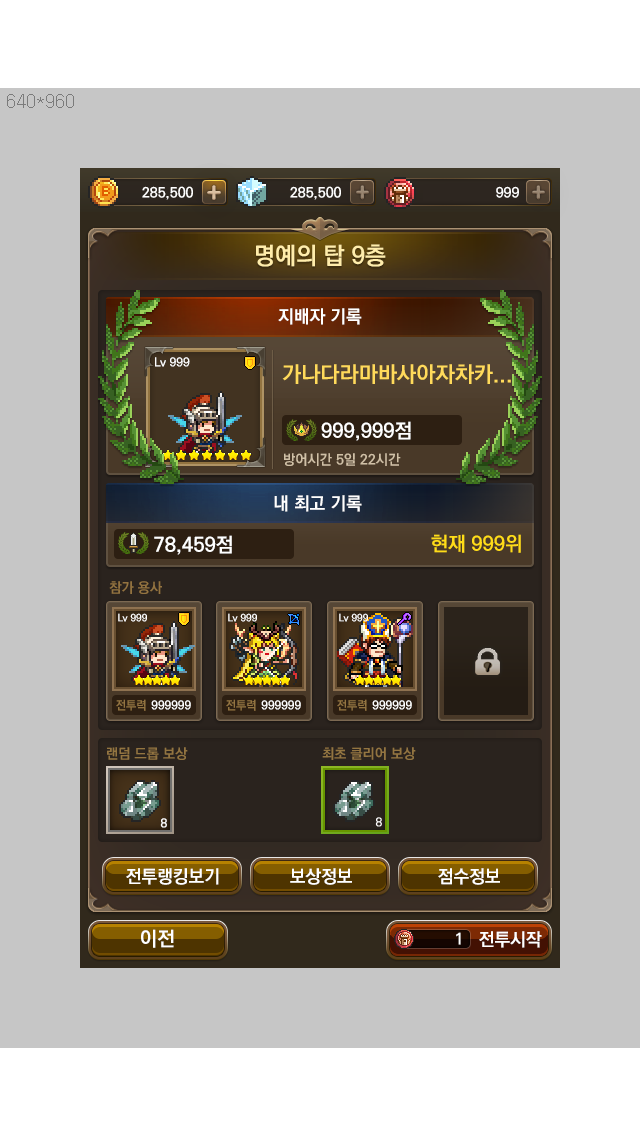
<style>
.page{position:relative;width:640px;height:1136px;background:#c6c6c6}
.page>*{position:absolute;margin:0}
.t1{font:14px "KoPubDotumBold";color:#ffffff}
.t2{font:24px "KoPubDotumBold";color:#ffedab}
.t3{font:18px "KoPubDotumBold";color:#ffffff}
.t4{font:12px "KoPubDotumBold";color:#ffffff}
.t5{font:22px "KoPubDotumBold";color:#ffda5b}
.t6{font:20px "KoPubDotumBold";color:#ffffff}
.t7{font:14px "KoPubDotumBold";color:#d0c0a6}
.t8{font:20px "KoPubDotumBold";color:#ffdc18}
.t9{font:14px "KoPubDotumBold";color:#937340}
.t10{font:10px "KoPubDotumBold";color:#ffffff}
.t11{font:12px "KoPubDotumBold";color:#937441}
.t12{font:14px "KoPubDotumBold";color:#937541}
.t13{font:16px "KoPubDotumBold";color:#ffffff}
</style>
<div class="page">
<p class="t1" style="left:496px;top:186px;width:23px;height:12px">999</p>
<p class="t2" style="left:256px;top:244px;width:130px;height:23px">명예의 탑 9층</p>
<p class="t3" style="left:278px;top:308px;width:84px;height:17px">지배자 기록</p>
<p class="t4" style="left:155px;top:357px;width:35px;height:10px">Lv 999</p>
<p class="t5" style="left:282px;top:364px;width:229px;height:20px">가나다라마바사아자차카...</p>
<p class="t6" style="left:321px;top:421px;width:90px;height:20px">999,999점</p>
<p class="t7" style="left:284px;top:453px;width:117px;height:13px">방어시간 5일 22시간</p>
<p class="t3" style="left:274px;top:495px;width:88px;height:17px">내 최고 기록</p>
<p class="t8" style="left:431px;top:534px;width:90px;height:19px">현재 999위</p>
<p class="t6" style="left:154px;top:535px;width:78px;height:20px">78,459점</p>
<p class="t9" style="left:109px;top:581px;width:53px;height:13px">참가 용사</p>
<p class="t10" style="left:118px;top:613px;width:29px;height:9px">Lv 999</p>
<p class="t10" style="left:228px;top:613px;width:29px;height:9px">Lv 999</p>
<p class="t10" style="left:339px;top:613px;width:29px;height:9px">Lv 999</p>
<p class="t11" style="left:116px;top:699px;width:30px;height:12px">전투력</p>
<p class="t4" style="left:151px;top:700px;width:40px;height:10px">999999</p>
<p class="t11" style="left:226px;top:699px;width:30px;height:12px">전투력</p>
<p class="t4" style="left:261px;top:700px;width:40px;height:10px">999999</p>
<p class="t11" style="left:337px;top:699px;width:30px;height:12px">전투력</p>
<p class="t4" style="left:372px;top:700px;width:40px;height:10px">999999</p>
<p class="t12" style="left:107px;top:747px;width:81px;height:13px">랜덤 드롭 보상</p>
<p class="t12" style="left:322px;top:747px;width:94px;height:13px">최초 클리어 보상</p>
<p class="t3" style="left:126px;top:868px;width:93px;height:17px">전투랭킹보기</p>
<p class="t3" style="left:290px;top:868px;width:62px;height:17px">보상정보</p>
<p class="t3" style="left:438px;top:868px;width:62px;height:17px">점수정보</p>
<p class="t6" style="left:141px;top:929px;width:33px;height:19px">이전</p>
<p class="t13" style="left:456px;top:932px;width:5px;height:13px">1</p>
<p class="t3" style="left:479px;top:931px;width:63px;height:17px">전투시작</p>
</div>
